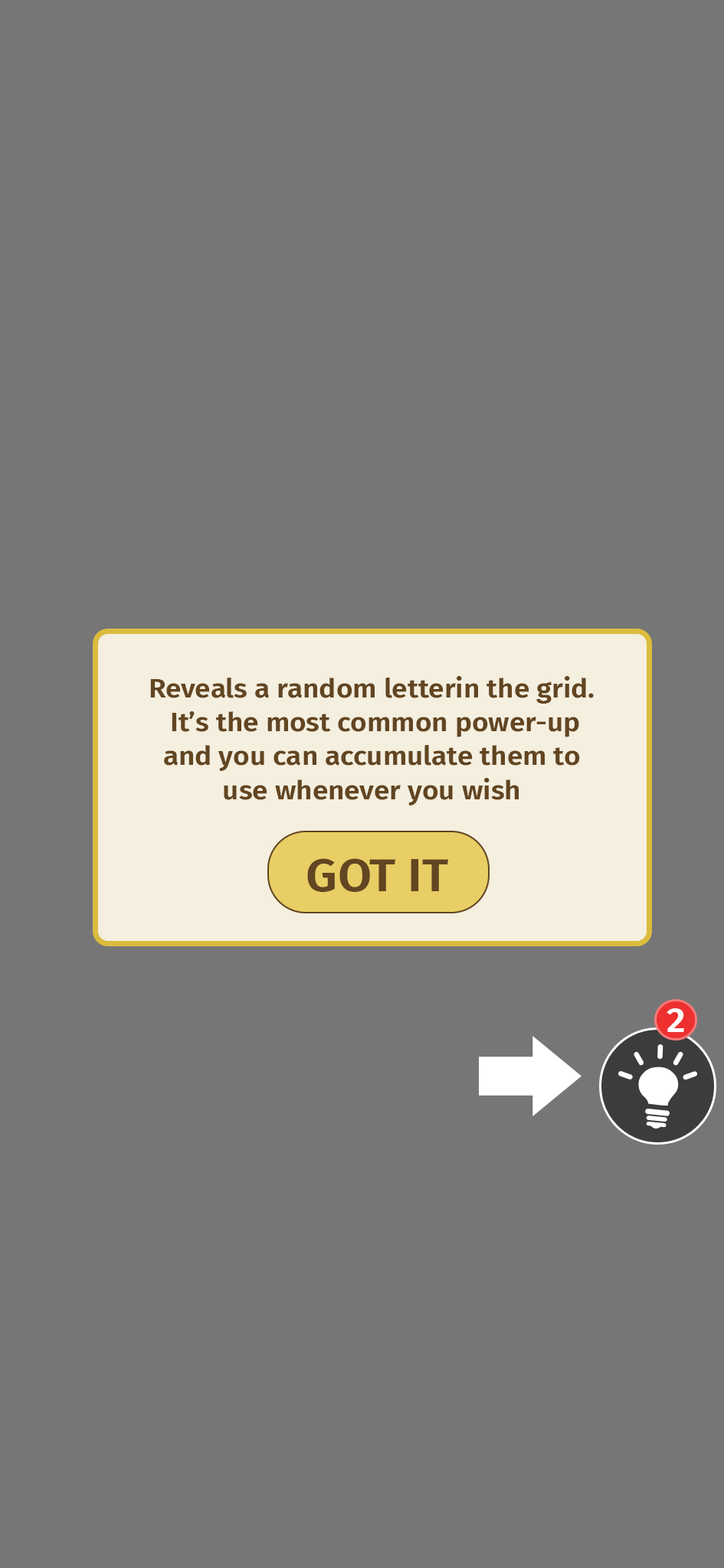
<style>
.page{position:relative;width:724px;height:1568px;background:#767676}
.page>*{position:absolute;margin:0}
.t1{font:26.9px "FiraSans-SemiBold";color:#624521;scale:1.05 1}
.t2{font:46.5px "FiraSans-SemiBold";color:#624521;scale:1.05 1}
.t3{font:35.1px "FiraSans-SemiBold";color:#ffffff;scale:1.05 1}
</style>
<div class="page">
<p class="t1" style="left:150px;top:676px;width:443px;height:129px;text-align:center">Reveals a random letterin the grid.<br> It’s the most common power-up<br>and you can accumulate them to<br>use whenever you wish</p>
<p class="t2" style="left:307px;top:858px;width:141px;height:34px">GOT IT</p>
<p class="t3" style="left:666px;top:1008px;width:18px;height:24px">2</p>
</div>
